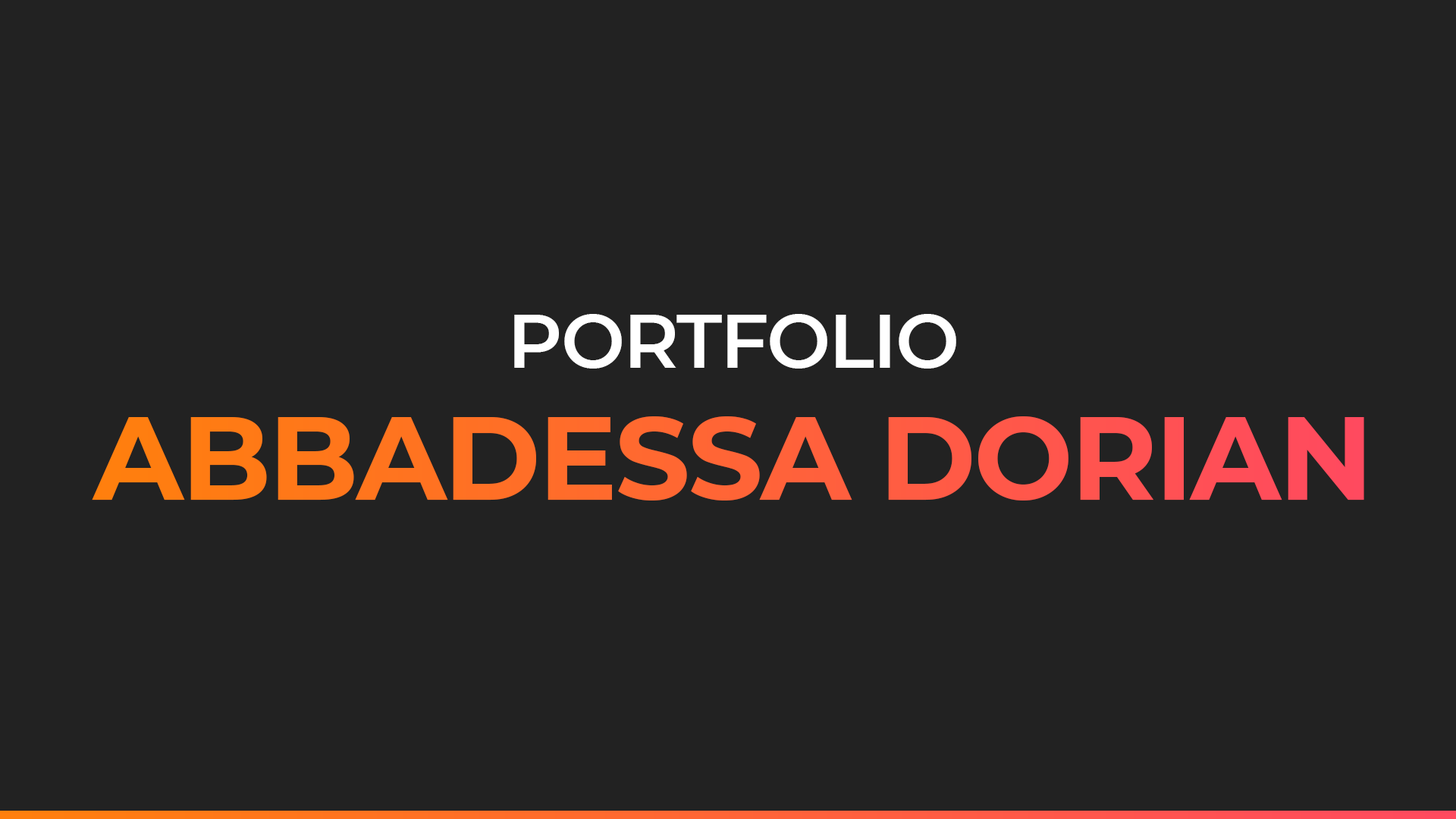
<style>
.page{position:relative;width:1456px;height:819px;background:#222222}
.page>*{position:absolute;margin:0}
.t1{font:75.8px "Montserrat-SemiBold";letter-spacing:-0.02em;color:#ffffff}
.t2{font:117.5px "Montserrat-Bold";letter-spacing:-0.02em}
</style>
<div class="page">
<p class="t1" style="left:514px;top:314px;width:442px;height:55px">PORTFOLIO</p>
<p class="t2" style="left:92px;top:416px;width:1272px;height:84px">ABBADESSA DORIAN</p>
</div>
